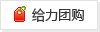
<style>
.page{position:relative;width:100px;height:32px;background:#ffffff}
.page>*{position:absolute;margin:0}
.t1{font:14px "MicrosoftYaHei";color:#333333;scale:0.94 1}
</style>
<div class="page">
<p class="t1" style="left:32px;top:8px;width:52px;height:15px">给力团购</p>
</div>
